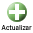
<style>
.page{position:relative;width:33px;height:33px;background:#ffffff}
.page>*{position:absolute;margin:0}
.t1{font:6.9px "Arial-BoldMT";scale:0.9 1}
</style>
<div class="page">
<p class="t1" style="left:1px;top:25px;width:31px;height:5px">Actualizar</p>
</div>
